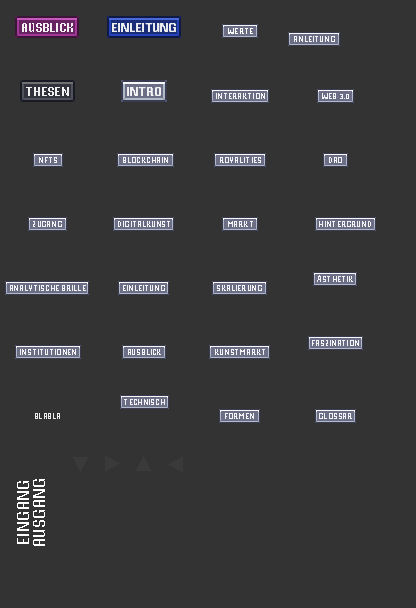
<style>
.page{position:relative;width:416px;height:608px;background:#333333}
.page>*{position:absolute;margin:0}
.t1{font:12.5px "VTFMisterPixel";color:#ffffff}
.t2{font:8.3px "VTFMisterPixel";color:#ffffff}
.t3{font:8.3px "VTFMisterPixel";color:#ffffff;text-transform:uppercase}
.t4{font:16.7px/16.7px "VTFMisterPixel";color:#ffffff;text-transform:uppercase}
</style>
<div class="page">
<p class="t1" style="left:22px;top:23px;width:51px;height:9px;opacity:0.9">AUSBLICK</p>
<p class="t1" style="left:112px;top:23px;width:64px;height:9px;opacity:0.9">EINLEITUNG</p>
<p class="t2" style="left:228px;top:28px;width:25px;height:6px">WERTE</p>
<p class="t2" style="left:294px;top:36px;width:41px;height:6px;opacity:0.9">ANLEITUNG</p>
<p class="t1" style="left:26px;top:87px;width:43px;height:9px;opacity:0.9">THESEN</p>
<p class="t1" style="left:127px;top:87px;width:34px;height:9px;opacity:0.9">INTRO</p>
<p class="t2" style="left:216px;top:93px;width:49px;height:6px;opacity:0.9">INTERAKTION</p>
<p class="t2" style="left:322px;top:93px;width:27px;height:6px;opacity:0.9">WEB 3.0</p>
<p class="t2" style="left:39px;top:157px;width:18px;height:6px;opacity:0.9">NFTS</p>
<p class="t2" style="left:123px;top:157px;width:45px;height:6px;opacity:0.9">BLOCKCHAIN</p>
<p class="t2" style="left:220px;top:157px;width:41px;height:6px;opacity:0.9">ROYALITIES</p>
<p class="t2" style="left:329px;top:157px;width:13px;height:6px;opacity:0.9">DAO</p>
<p class="t3" style="left:33px;top:221px;width:29px;height:6px;opacity:0.9">Zugang</p>
<p class="t2" style="left:118px;top:221px;width:52px;height:6px;opacity:0.9">DIGITALKUNST</p>
<p class="t3" style="left:228px;top:221px;width:25px;height:6px;opacity:0.9">Markt</p>
<p class="t2" style="left:319px;top:221px;width:52px;height:6px;opacity:0.9">HINTERGRUND</p>
<p class="t2" style="left:317px;top:275px;width:36px;height:7px;opacity:0.9">ÄSTHETIK</p>
<p class="t2" style="left:10px;top:285px;width:76px;height:6px;opacity:0.9">ANALYTISCHE BRILLE</p>
<p class="t2" style="left:123px;top:285px;width:42px;height:6px;opacity:0.9">EINLEITUNG</p>
<p class="t2" style="left:217px;top:285px;width:45px;height:6px;opacity:0.9">SKALIERUNG</p>
<p class="t3" style="left:312px;top:340px;width:47px;height:6px;opacity:0.9">Faszination</p>
<p class="t3" style="left:20px;top:349px;width:56px;height:6px;opacity:0.9">Institutionen</p>
<p class="t2" style="left:128px;top:349px;width:33px;height:6px;opacity:0.9">AUSBLICK</p>
<p class="t2" style="left:215px;top:349px;width:50px;height:6px;opacity:0.9">KUNSTMARKT</p>
<p class="t3" style="left:124px;top:399px;width:41px;height:6px;opacity:0.9">Technisch</p>
<p class="t3" style="left:35px;top:413px;width:25px;height:6px;opacity:0.9">blabla</p>
<p class="t3" style="left:225px;top:413px;width:29px;height:6px;opacity:0.9">Formen</p>
<p class="t3" style="left:319px;top:413px;width:33px;height:6px;opacity:0.9">glossar</p>
<p class="t4" style="left:17px;top:479px;width:28px;height:67px;text-align:center;rotate:-90deg">eingang<br>ausgang</p>
</div>
